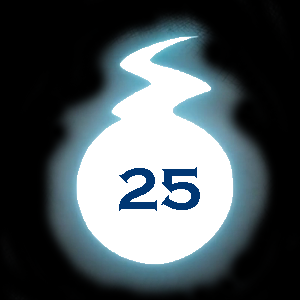
<style>
.page{position:relative;width:300px;height:300px;background:#000000}
.page>*{position:absolute;margin:0}
.t1{font:60px "CopperplateGothic-Bold";color:#003774}
</style>
<div class="page">
<p class="t1" style="left:119px;top:167px;width:81px;height:44px">25</p>
</div>
